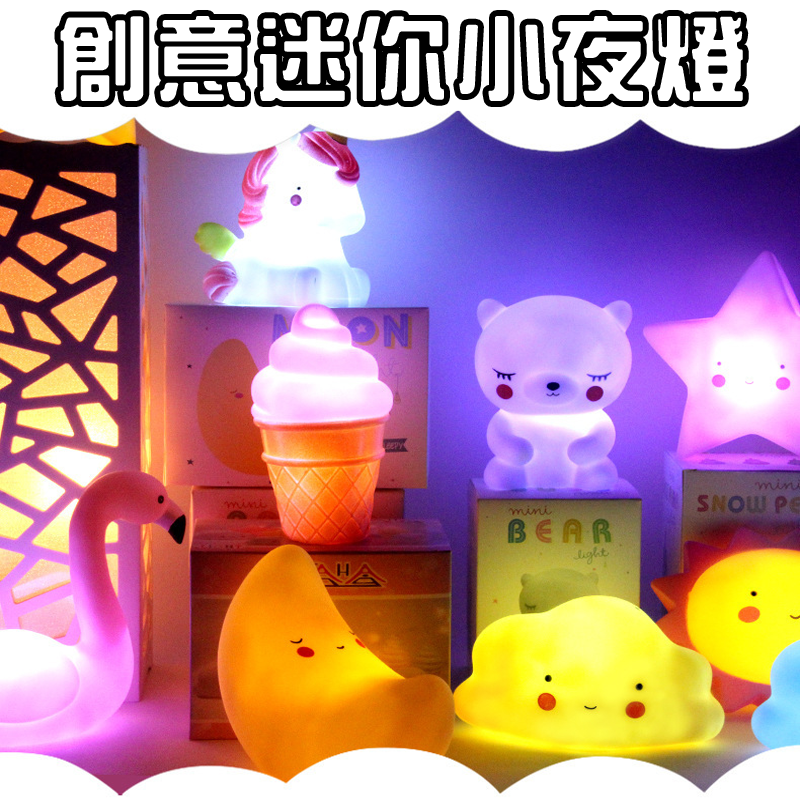
<style>
.page{position:relative;width:800px;height:800px}
.page>*{position:absolute;margin:0}
.t1{font:90.5px "HanWangZonYi";letter-spacing:0.1em;color:#ffffff}
</style>
<div class="page">
<p class="t1" style="left:60px;top:16px;width:683px;height:86px">創意迷你小夜燈</p>
</div>
